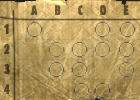
<style>
.page{position:relative;width:140px;height:100px}
.page>*{position:absolute;margin:0}
.t1{font:12px "Fallout";letter-spacing:1.45em;color:#615334}
.t2{font:12px/20px "Fallout";color:#4e4227}
</style>
<div class="page">
<p class="t1" style="left:31px;top:5px;width:98px;height:10px">ABCDE</p>
<p class="t2" style="left:4px;top:24px;width:6px;height:70px">1<br>2<br>3<br>4</p>
</div>
